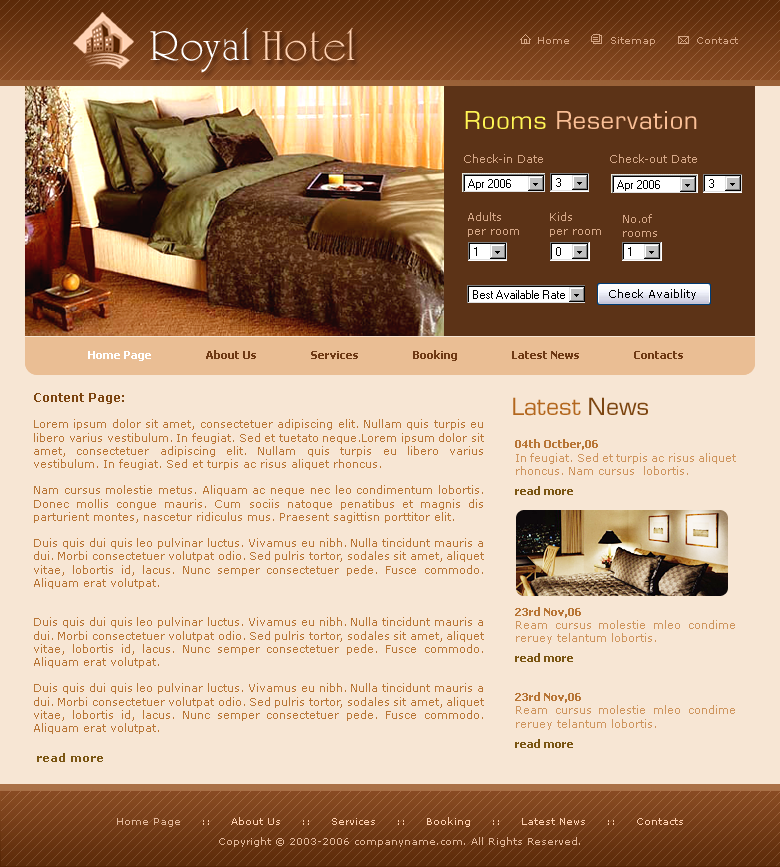
<style>
.page{position:relative;width:780px;height:867px;background:#f7e6d4}
.page>*{position:absolute;margin:0}
.t1{font:43px "UniversityRomanLetPlain";letter-spacing:0.02em;color:#ffffff}
.t2{font:43px "UniversityRomanLetPlain";letter-spacing:0.02em;color:#ffd2b3}
.t3{font:10px "Verdana";color:#d5a584}
.t4{font:27px "Eurostile-Roman-DTC";letter-spacing:0.03em;color:#fabf96}
.t5{font:27px "Eurostile-Roman-DTC";letter-spacing:0.03em;color:#fff554}
.t6{font:11px "Verdana";color:#d5a787}
.t7{font:11px "Tahoma-Bold";color:#6f3a15}
.t8{font:11px "Tahoma-Bold";color:#ffffff}
.t9{font:12px "Verdana-Bold";color:#7c4510}
.t10{font:26px "Eurostile-Roman-DTC";color:#b3671e}
.t11{font:26px "Eurostile-Roman-DTC";color:#7c4510}
.t12{font:11px "Verdana";color:#b87637}
.t13{font:11px "Verdana";color:#ce955e}
.t14{font:11px/19px "Tahoma-Bold";color:#b87637}
.t15{font:11px/20px "Tahoma-Bold";color:#7b5613}
.t16{font:11px "Verdana-Bold";color:#7b5613}
.t17{font:10px/20px "Verdana";color:#ffd2b3}
.t18{font:10px/20px "Verdana";color:#e3b99c}
</style>
<div class="page">
<p class="t1" style="left:150px;top:27px;width:205px;height:46px">Royal<span class="t2"> Hotel</span></p>
<p class="t3" style="left:538px;top:37px;width:200px;height:9px">Home          Sitemap          Contact</p>
<p class="t4" style="left:465px;top:111px;width:232px;height:19px"><span class="t5">Rooms </span>Reservation</p>
<p class="t6" style="left:464px;top:154px;width:79px;height:9px">Check-in Date</p>
<p class="t6" style="left:610px;top:154px;width:87px;height:9px">Check-out Date</p>
<p class="t6" style="left:468px;top:212px;width:51px;height:25px">Adults<br>per room</p>
<p class="t6" style="left:550px;top:212px;width:51px;height:25px">Kids<br>per room</p>
<p class="t6" style="left:623px;top:214px;width:34px;height:23px">No.of rooms</p>
<p class="t7" style="left:88px;top:350px;width:595px;height:11px"><span class="t8">Home Page</span>                  About Us                  Services                  Booking                  Latest News                  Contacts</p>
<p class="t9" style="left:34px;top:393px;width:90px;height:11px">Content Page:</p>
<p class="t10" style="left:513px;top:397px;width:135px;height:19px">Latest <span class="t11">News</span></p>
<p class="t12" style="left:34px;top:419px;width:450px;height:315px;text-align:justify">Lorem ipsum dolor sit amet, consectetuer adipiscing elit. Nullam quis turpis eu libero varius vestibulum. In feugiat. Sed et tuetato neque.Lorem ipsum dolor sit amet, consectetuer adipiscing elit. Nullam quis turpis eu libero varius vestibulum. In feugiat. Sed et turpis ac risus aliquet rhoncus. <br><br>Nam cursus molestie metus. Aliquam ac neque nec leo condimentum lobortis. Donec mollis congue mauris. Cum sociis natoque penatibus et magnis dis parturient montes, nascetur ridiculus mus. Praesent sagittisn porttitor elit. <br><br>Duis quis dui quis leo pulvinar luctus. Vivamus eu nibh. Nulla tincidunt mauris a dui. Morbi consectetuer volutpat odio. Sed pulris tortor, sodales sit amet, aliquet vitae, lobortis id, lacus. Nunc semper consectetuer pede. Fusce commodo. Aliquam erat volutpat.<br><br><br>Duis quis dui quis leo pulvinar luctus. Vivamus eu nibh. Nulla tincidunt mauris a dui. Morbi consectetuer volutpat odio. Sed pulris tortor, sodales sit amet, aliquet vitae, lobortis id, lacus. Nunc semper consectetuer pede. Fusce commodo. Aliquam erat volutpat.<br><br>Duis quis dui quis leo pulvinar luctus. Vivamus eu nibh. Nulla tincidunt mauris a dui. Morbi consectetuer volutpat odio. Sed pulris tortor, sodales sit amet, aliquet vitae, lobortis id, lacus. Nunc semper consectetuer pede. Fusce commodo. Aliquam erat volutpat.</p>
<p class="t13" style="left:515px;top:439px;width:221px;height:309px;text-align:justify"><span class="t14">04th Octber,06<br></span>In feugiat. Sed et turpis ac risus aliquet rhoncus. Nam cursus  lobortis.<br><span class="t15">read more<br><br><br><br><br><br></span><span class="t14">23rd Nov,06<br></span>Ream cursus molestie mleo condime reruey telantum lobortis.<br><span class="t15">read more<br><br></span><span class="t14">23rd Nov,06<br></span>Ream cursus molestie mleo condime reruey telantum lobortis.<br><span class="t15">read more</span></p>
<p class="t16" style="left:37px;top:753px;width:66px;height:9px">read more</p>
<p class="t17" style="left:117px;top:817px;width:566px;height:30px;text-align:center"><span class="t18">Home Page </span>    ::     About Us     ::     Services     ::     Booking     ::     Latest News     ::     Contacts<br><span class="t18">Copyright © 2003-2006 companyname.com. All Rights Reserved.</span></p>
</div>
